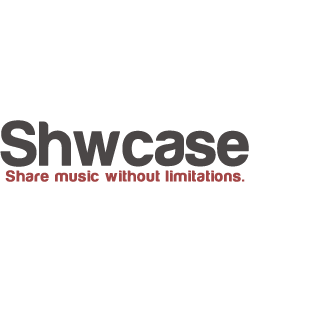
<style>
.page{position:relative;width:309px;height:309px;background:#ffffff}
.page>*{position:absolute;margin:0}
.t1{font:16.1px/9.4px "Harabara";letter-spacing:0.06em;color:#9d3a3a;font-weight:bold}
.t2{font:64.3px/6.7px "Harabara";color:#403b3b;font-weight:bold}
</style>
<div class="page">
<p class="t1" style="left:0px;top:120px;width:249px;height:62px;opacity:0.94"><span class="t2">Shwcase<br><br></span> Share music without limitations.</p>
</div>
